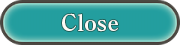
<style>
.page{position:relative;width:180px;height:45px;background:#239e9f}
.page>*{position:absolute;margin:0}
.t1{font:23px "RyuminPro-ExBold";color:#ffffff}
</style>
<div class="page">
<p class="t1" style="left:62px;top:13px;width:56px;height:19px">Close</p>
</div>
